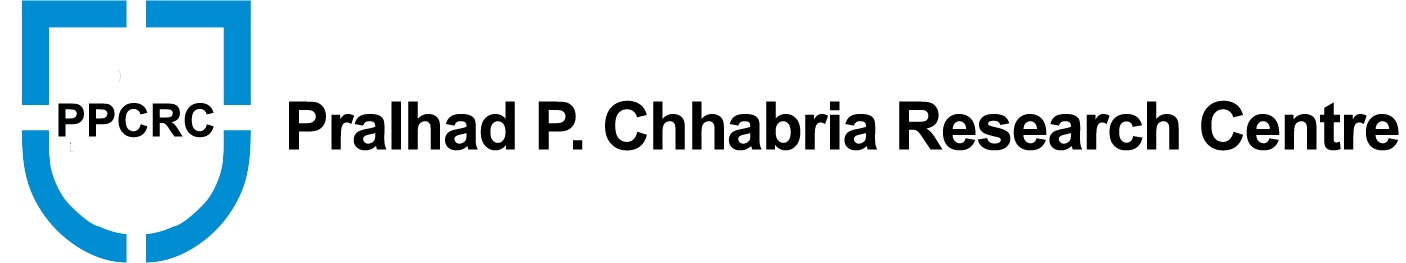
<style>
.page{position:relative;width:1406px;height:263px;background:#ffffff}
.page>*{position:absolute;margin:0}
.t1{font:66.7px "Arial-BoldMT";letter-spacing:-0.025em;color:#000000}
</style>
<div class="page">
<p class="t1" style="left:289px;top:100px;width:1110px;height:51px">Pralhad P. Chhabria Research Centre</p>
</div>
